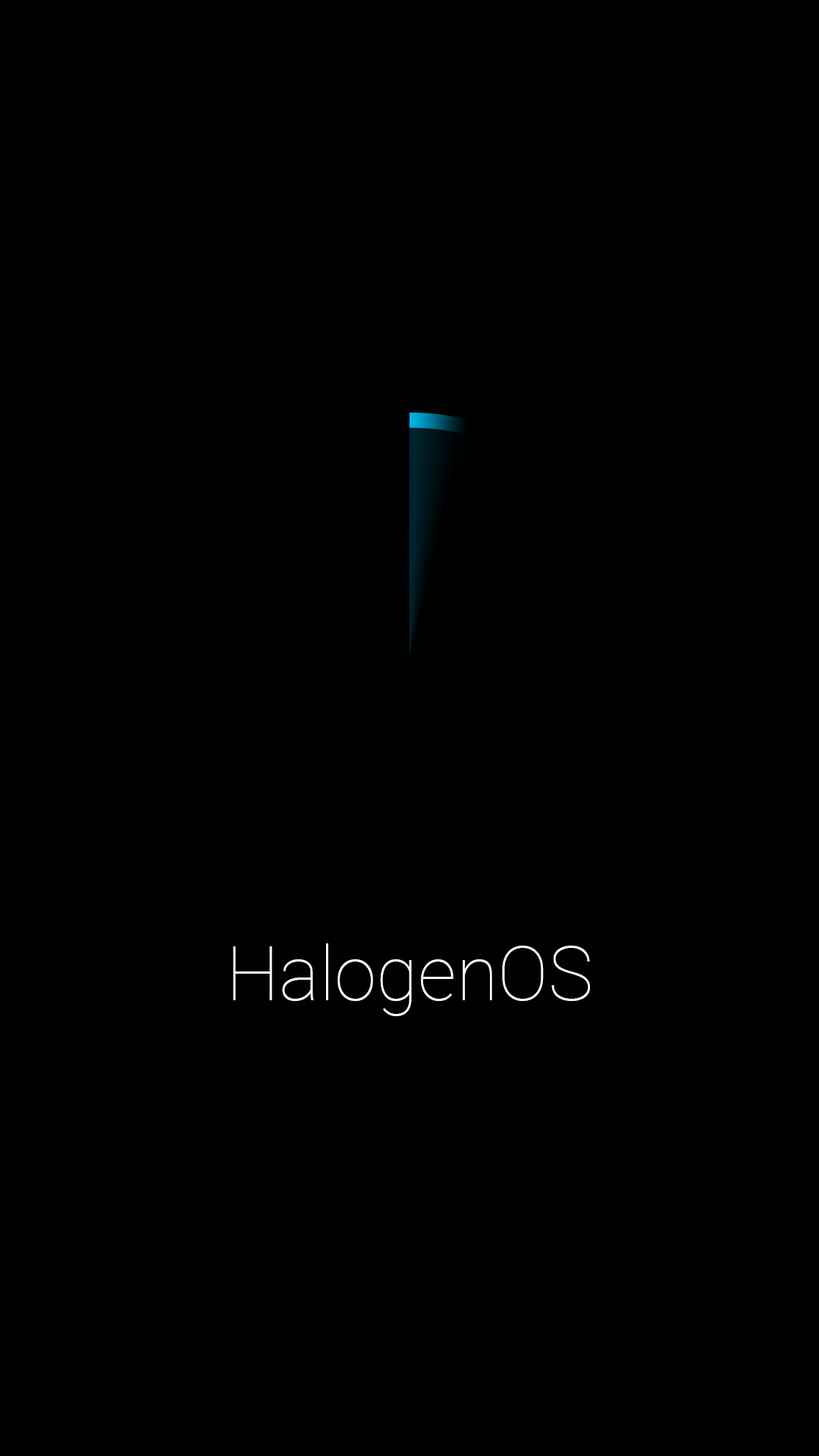
<style>
.page{position:relative;width:819px;height:1456px;background:#000000}
.page>*{position:absolute;margin:0}
.t1{font:75.8px "Roboto-Thin";color:#ffffff}
</style>
<div class="page">
<p class="t1" style="left:233px;top:943px;width:357px;height:73px">HalogenOS</p>
</div>
